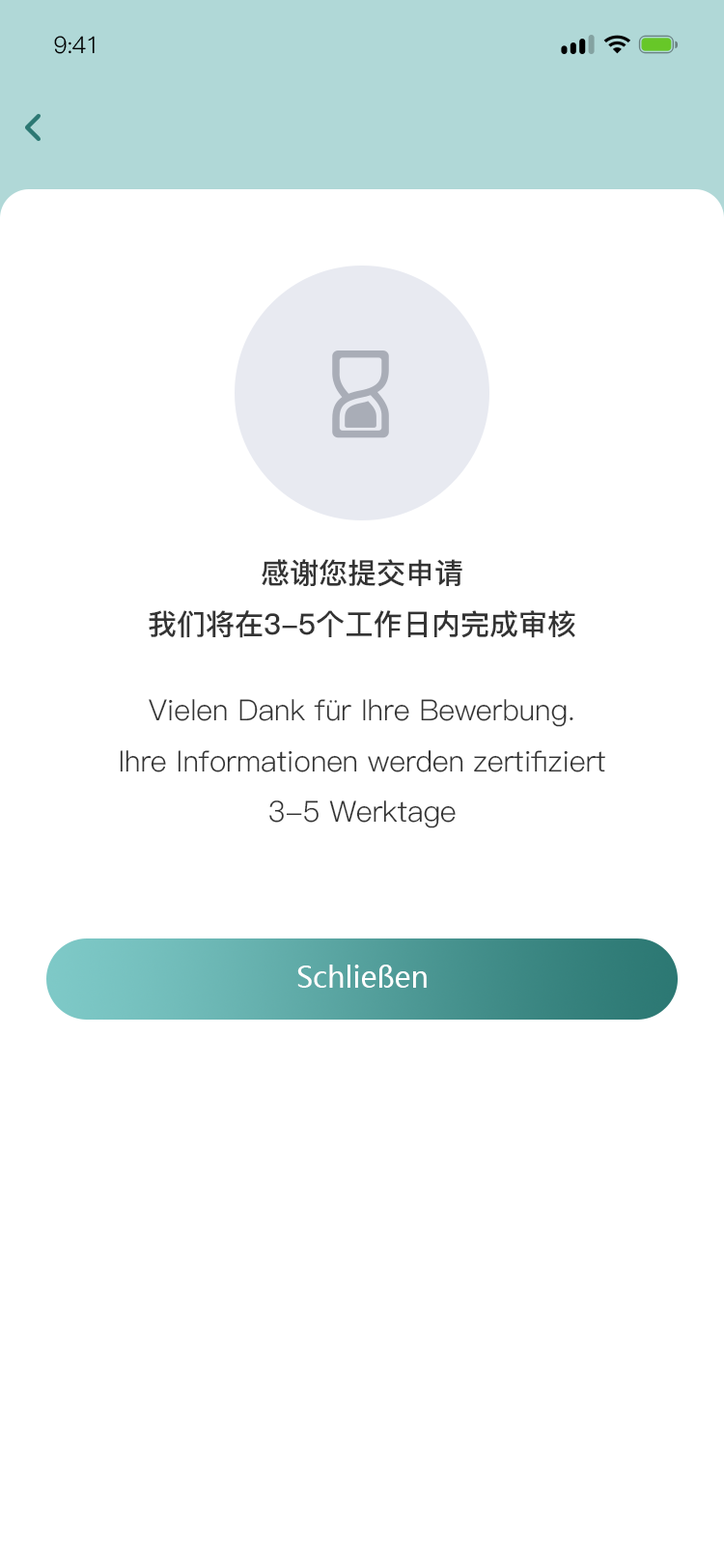
<style>
.page{position:relative;width:724px;height:1568px;background:#ffffff}
.page>*{position:absolute;margin:0}
.t1{font:23.2px "PingFang-SC-Regular";letter-spacing:-0.025em;color:#000000}
.t2{font:29px "PingFang-SC-Bold";color:#333333}
.t3{font:29px "PingFang-SC-Regular";color:#333333}
.t4{font:29px "MicrosoftYaHei";color:#ffffff}
</style>
<div class="page">
<p class="t1" style="left:54px;top:36px;width:41px;height:18px">9:41</p>
<p class="t2" style="left:149px;top:559px;width:426px;height:79px;text-align:center">感谢您提交申请<br>我们将在3-5个工作日内完成审核</p>
<p class="t3" style="left:120px;top:699px;width:485px;height:129px;text-align:center">Vielen Dank für Ihre Bewerbung. <br>Ihre Informationen werden zertifiziert<br>3-5 Werktage</p>
<p class="t4" style="left:297px;top:965px;width:130px;height:23px">Schließen</p>
</div>
